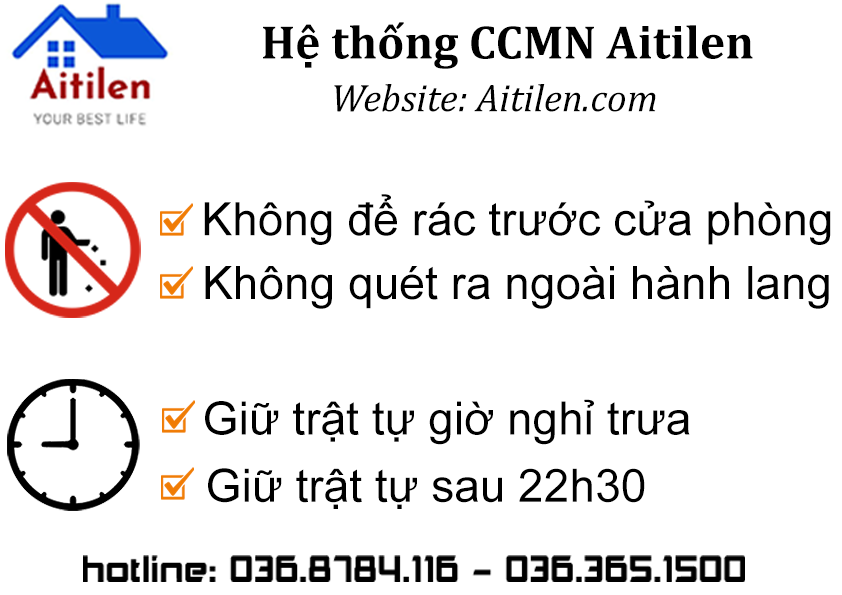
<style>
.page{position:relative;width:842px;height:595px;background:#ffffff}
.page>*{position:absolute;margin:0}
.t1{font:47.8px "Cambria-Bold";color:#000000}
.t2{font:39px "Cambria-Italic";color:#000000}
.t3{font:46.1px "ArialMT";color:#000000}
</style>
<div class="page">
<p class="t1" style="left:263px;top:22px;width:490px;height:47px">Hệ thống CCMN Aitilen</p>
<p class="t2" style="left:334px;top:84px;width:322px;height:28px">Website: Aitilen.com</p>
<p class="t3" style="left:204px;top:194px;width:627px;height:51px">Không để rác trước cửa phòng</p>
<p class="t3" style="left:205px;top:266px;width:624px;height:43px">Không quét ra ngoài hành lang</p>
<p class="t3" style="left:205px;top:399px;width:485px;height:46px">Giữ trật tự giờ nghỉ trưa</p>
<p class="t3" style="left:208px;top:468px;width:437px;height:41px">Giữ trật tự sau 22h30</p>
</div>
